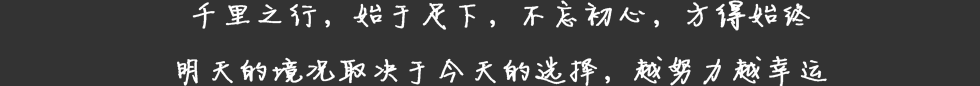
<style>
.page{position:relative;width:980px;height:86px;background:#333333}
.page>*{position:absolute;margin:0}
.t1{font:32px "FZJLJW--GB1-0";color:#ffffff;font-weight:bold}
</style>
<div class="page">
<p class="t1" style="left:177px;top:0px;width:650px;height:87px;text-align:center">千里之行，始于足下，不忘初心，方得始终<br>明天的境况取决于今天的选择，越努力越幸运</p>
</div>
